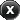
<style>
.page{position:relative;width:20px;height:20px;background:#ffffff}
.page>*{position:absolute;margin:0}
.t1{font:11px "Verdana-Bold";color:#ffffff}
</style>
<div class="page">
<p class="t1" style="left:6px;top:6px;width:9px;height:8px">X</p>
</div>
